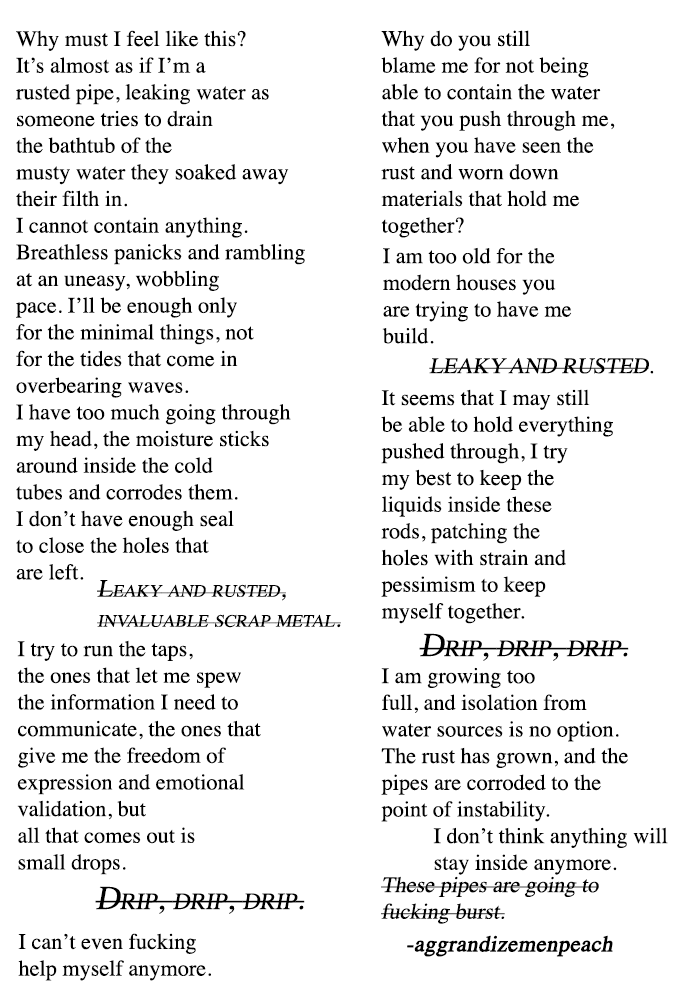
<style>
.page{position:relative;width:688px;height:1000px;background:#ffffff}
.page>*{position:absolute;margin:0}
.t1{font:22.2px "Times-Roman";color:#000000}
.t2{font:22.2px "Times-Roman";color:#000000;text-transform:uppercase;font-style:italic}
.t3{font:25px "Times-Roman";color:#000000;font-variant:small-caps;font-style:italic}
.t4{font:33.3px "Times-Roman";color:#000000;font-variant:small-caps;font-style:italic}
.t5{font:22.2px "Times-Roman";color:#000000;font-style:italic}
.t6{font:22.2px "Times-Roman";color:#000000;font-weight:bold;font-style:italic}
</style>
<div class="page">
<p class="t1" style="left:16px;top:30px;width:289px;height:550px">Why must I feel like this?<br>It’s almost as if I’m a<br>rusted pipe, leaking water as<br>someone tries to drain<br>the bathtub of the <br>musty water they soaked away <br>their filth in.<br>I cannot contain anything.<br>Breathless panicks and rambling<br>at an uneasy, wobbling<br>pace. I’ll be enough only<br>for the minimal things, not<br>for the tides that come in<br>overbearing waves.<br>I have too much going through<br>my head, the moisture sticks<br>around inside the cold<br>tubes and corrodes them.<br>I don’t have enough seal<br>to close the holes that<br>are left.</p>
<p class="t1" style="left:381px;top:30px;width:234px;height:208px">Why do you still <br>blame me for not being<br>able to contain the water<br>that you push through me,<br>when you have seen the<br>rust and worn down <br>materials that hold me<br>together?</p>
<p class="t1" style="left:382px;top:247px;width:190px;height:97px">I am too old for the<br>modern houses you<br>are trying to have me<br>build.</p>
<p class="t2" style="left:429px;top:358px;width:225px;height:16px">leaky and rusted<span class="t1">.</span></p>
<p class="t1" style="left:381px;top:389px;width:232px;height:235px">It seems that I may still<br>be able to hold everything<br>pushed through, I try <br>my best to keep the<br>liquids inside these<br>rods, patching the<br>holes with strain and <br>pessimism to keep <br>myself together.</p>
<p class="t3" style="left:97px;top:580px;width:244px;height:48px">Leaky and rusted,<br>invaluable scrap metal.</p>
<p class="t1" style="left:17px;top:640px;width:244px;height:235px">I try to run the taps,<br>the ones that let me spew<br>the information I need to<br>communicate, the ones that<br>give me the freedom of <br>expression and emotional<br>validation, but<br>all that comes out is <br>small drops.</p>
<p class="t4" style="left:419px;top:633px;width:210px;height:28px">Drip, drip, drip.</p>
<p class="t1" style="left:381px;top:667px;width:247px;height:155px">I am growing too<br>full, and isolation from<br>water sources is no option.<br>The rust has grown, and the<br>pipes are corroded to the<br>point of instability.</p>
<p class="t1" style="left:433px;top:827px;width:235px;height:48px">I don’t think anything will<br>stay inside anymore.</p>
<p class="t5" style="left:381px;top:876px;width:218px;height:48px">These pipes are going to<br>fucking burst.</p>
<p class="t4" style="left:95px;top:886px;width:210px;height:28px">Drip, drip, drip.</p>
<p class="t1" style="left:18px;top:933px;width:193px;height:48px">I can’t even fucking<br>help myself anymore.</p>
<p class="t6" style="left:407px;top:935px;width:206px;height:22px">-aggrandizemenpeach</p>
</div>
